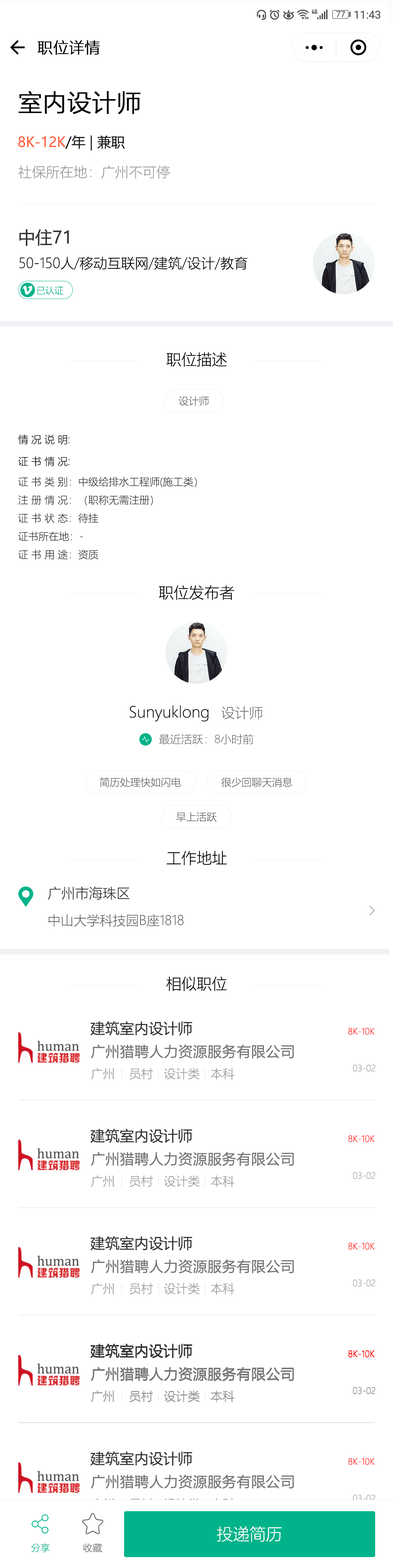
<style>
.page{position:relative;width:393px;height:1568px;background:#ffffff}
.page>*{position:absolute;margin:0}
.t1{font:15.3px "MicrosoftYaHeiLight";color:#010101;font-weight:bold}
.t2{font:24px "MicrosoftYaHeiLight";color:#010101;font-weight:bold}
.t3{font:13.8px "MicrosoftYaHei";color:#151515}
.t4{font:13.8px "MicrosoftYaHei";color:#fd5f39}
.t5{font:13.8px "MicrosoftYaHeiLight";color:#999999}
.t6{font:17.1px "MicrosoftYaHei";color:#333333}
.t7{font:13.8px "MicrosoftYaHeiLight";color:#000000}
.t8{font:9.1px "MicrosoftYaHeiLight";color:#00b38a}
.t9{font:15.3px "MicrosoftYaHeiLight";color:#000000}
.t10{font:10.2px "MicrosoftYaHeiLight";color:#666666}
.t11{font:10.2px "MicrosoftYaHeiLight";color:#000000}
.t12{font:10.2px/18.2px "MicrosoftYaHeiLight";color:#333333}
.t13{font:15.2px "MicrosoftYaHeiLight";color:#040404}
.t14{font:13.7px "MicrosoftYaHeiLight";color:#777777}
.t15{font:10.9px "MicrosoftYaHeiLight";color:#777777}
.t16{font:13.8px "MicrosoftYaHeiLight";color:#333333}
.t17{font:13.1px "MicrosoftYaHeiLight";color:#666666}
.t18{font:14.6px "MicrosoftYaHei";color:#333333}
.t19{font:8.7px "MicrosoftYaHeiLight";color:#ff0000}
.t20{font:14.2px "MicrosoftYaHeiLight";color:#777777;font-weight:bold}
.t21{font:12px "MicrosoftYaHeiLight";color:#999999}
.t22{font:8.7px "MicrosoftYaHeiLight";color:#999999}
.t23{font:16.4px "MicrosoftYaHeiLight";color:#ffffff}
.t24{font:9.5px "MicrosoftYaHeiLight";color:#00b38a}
.t25{font:9.5px "MicrosoftYaHeiLight";color:#666666}
</style>
<div class="page">
<p class="t1" style="left:38px;top:40px;width:62px;height:15px">职位详情</p>
<p class="t2" style="left:19px;top:91px;width:122px;height:23px">室内设计师</p>
<p class="t3" style="left:18px;top:135px;width:107px;height:16px"><span class="t4">8K-12K</span>/年 | 兼职</p>
<p class="t5" style="left:18px;top:165px;width:152px;height:14px">社保所在地：广州不可停</p>
<p class="t6" style="left:19px;top:229px;width:50px;height:17px">中住71</p>
<p class="t7" style="left:19px;top:256px;width:229px;height:14px">50-150人/移动互联网/建筑/设计/教育</p>
<p class="t8" style="left:37px;top:286px;width:26px;height:9px">已认证</p>
<p class="t9" style="left:166px;top:352px;width:61px;height:15px">职位描述</p>
<p class="t10" style="left:179px;top:396px;width:30px;height:10px">设计师</p>
<p class="t11" style="left:18px;top:435px;width:52px;height:10px">情 况 说 明:</p>
<p class="t11" style="left:18px;top:456px;width:52px;height:11px">证 书 情 况:</p>
<p class="t12" style="left:18px;top:477px;width:179px;height:83px">证 书 类 别：中级给排水工程师(施工类）<br>注 册 情 况：（职称无需注册）<br>证 书 状 态：待挂<br>证书所在地：-<br>证 书 用 途：资质</p>
<p class="t9" style="left:159px;top:585px;width:76px;height:15px">职位发布者</p>
<p class="t13" style="left:130px;top:705px;width:79px;height:17px">Sunyuklong</p>
<p class="t14" style="left:221px;top:706px;width:42px;height:13px">设计师</p>
<p class="t15" style="left:159px;top:734px;width:95px;height:10px">最近活跃：8小时前</p>
<p class="t10" style="left:100px;top:777px;width:81px;height:10px">简历处理快如闪电</p>
<p class="t10" style="left:221px;top:777px;width:72px;height:10px">很少回聊天消息</p>
<p class="t10" style="left:176px;top:812px;width:41px;height:10px">早上活跃</p>
<p class="t9" style="left:167px;top:851px;width:60px;height:14px">工作地址</p>
<p class="t16" style="left:48px;top:887px;width:82px;height:13px">广州市海珠区</p>
<p class="t17" style="left:48px;top:914px;width:136px;height:13px">中山大学科技园B座1818</p>
<p class="t9" style="left:166px;top:976px;width:61px;height:15px">相似职位</p>
<p class="t18" style="left:91px;top:1021px;width:101px;height:15px">建筑室内设计师</p>
<p class="t19" style="left:349px;top:1027px;width:26px;height:8px">8K-10K</p>
<p class="t20" style="left:91px;top:1044px;width:203px;height:15px">广州猎聘人力资源服务有限公司</p>
<p class="t21" style="left:91px;top:1068px;width:144px;height:12px">广州    员村   设计类   本科</p>
<p class="t22" style="left:353px;top:1065px;width:23px;height:7px">03-02</p>
<p class="t18" style="left:91px;top:1128px;width:101px;height:15px">建筑室内设计师</p>
<p class="t19" style="left:349px;top:1135px;width:26px;height:7px">8K-10K</p>
<p class="t20" style="left:91px;top:1152px;width:203px;height:14px">广州猎聘人力资源服务有限公司</p>
<p class="t21" style="left:91px;top:1175px;width:144px;height:12px">广州    员村   设计类   本科</p>
<p class="t22" style="left:353px;top:1172px;width:23px;height:7px">03-02</p>
<p class="t18" style="left:91px;top:1236px;width:101px;height:15px">建筑室内设计师</p>
<p class="t19" style="left:349px;top:1242px;width:26px;height:8px">8K-10K</p>
<p class="t20" style="left:91px;top:1259px;width:203px;height:15px">广州猎聘人力资源服务有限公司</p>
<p class="t21" style="left:91px;top:1283px;width:144px;height:11px">广州    员村   设计类   本科</p>
<p class="t22" style="left:353px;top:1280px;width:23px;height:6px">03-02</p>
<p class="t18" style="left:91px;top:1343px;width:101px;height:15px">建筑室内设计师</p>
<p class="t18" style="left:91px;top:1344px;width:101px;height:15px">建筑室内设计师</p>
<p class="t19" style="left:349px;top:1350px;width:26px;height:7px">8K-10K</p>
<p class="t19" style="left:349px;top:1350px;width:26px;height:7px">8K-10K</p>
<p class="t20" style="left:91px;top:1367px;width:203px;height:14px">广州猎聘人力资源服务有限公司</p>
<p class="t20" style="left:91px;top:1367px;width:203px;height:15px">广州猎聘人力资源服务有限公司</p>
<p class="t21" style="left:91px;top:1390px;width:144px;height:12px">广州    员村   设计类   本科</p>
<p class="t21" style="left:91px;top:1391px;width:144px;height:11px">广州    员村   设计类   本科</p>
<p class="t22" style="left:353px;top:1387px;width:23px;height:7px">03-02</p>
<p class="t22" style="left:353px;top:1387px;width:23px;height:7px">03-02</p>
<p class="t18" style="left:91px;top:1451px;width:101px;height:15px">建筑室内设计师</p>
<p class="t19" style="left:349px;top:1458px;width:26px;height:7px">8K-10K</p>
<p class="t20" style="left:91px;top:1474px;width:203px;height:15px">广州猎聘人力资源服务有限公司</p>
<p class="t22" style="left:353px;top:1495px;width:23px;height:7px">03-02</p>
<p class="t23" style="left:217px;top:1526px;width:65px;height:16px">投递简历</p>
<p class="t24" style="left:31px;top:1543px;width:19px;height:9px">分享</p>
<p class="t25" style="left:83px;top:1543px;width:19px;height:9px">收藏</p>
</div>
